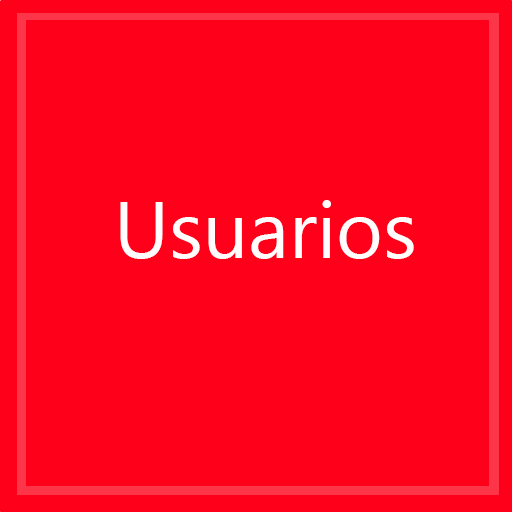
<style>
.page{position:relative;width:512px;height:512px;background:#ff001a}
.page>*{position:absolute;margin:0}
.t1{font:80px "SegoeUISymbol";color:#fefcfc}
</style>
<div class="page">
<p class="t1" style="left:120px;top:200px;width:294px;height:59px">Usuarios</p>
</div>
